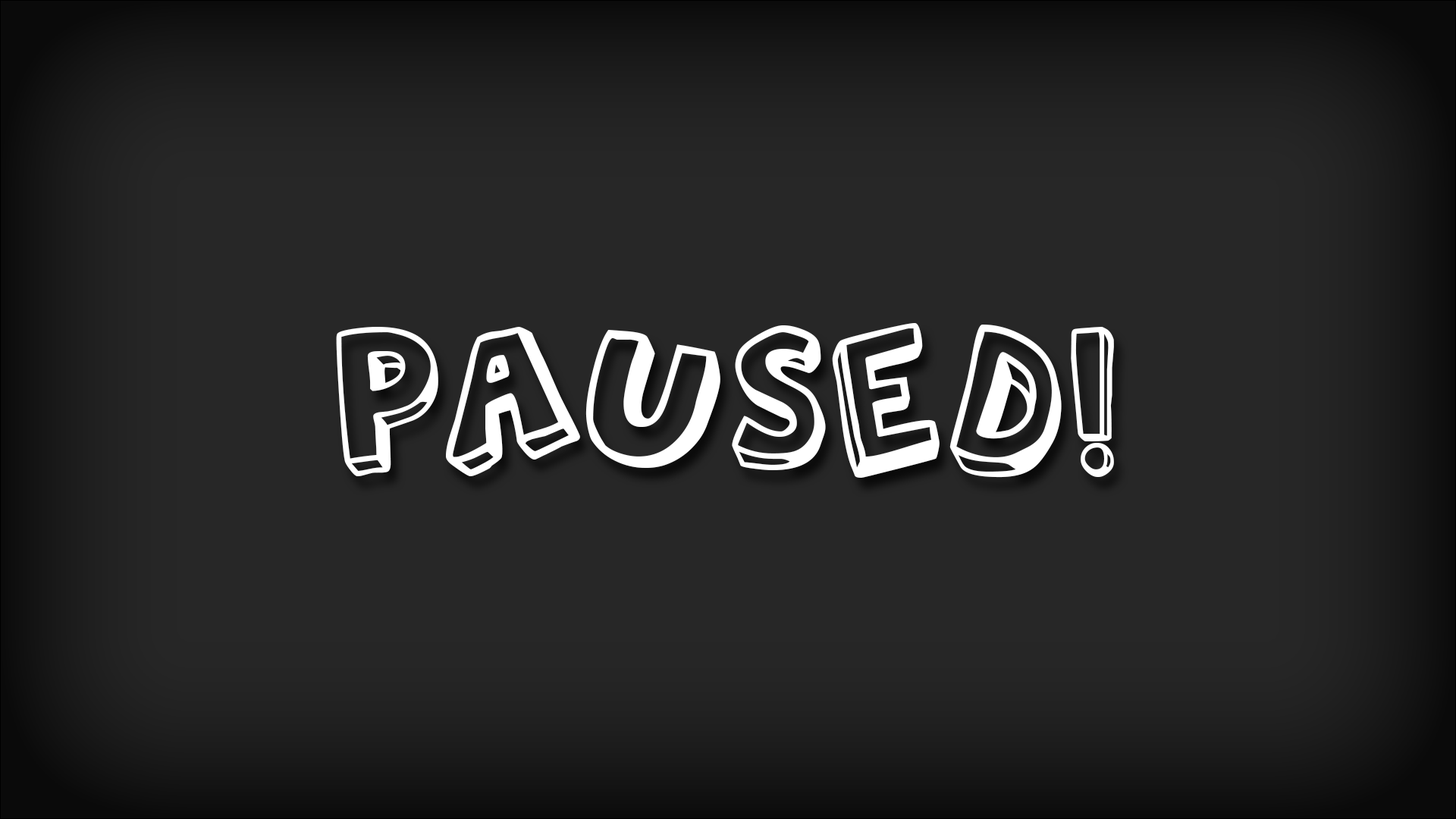
<style>
.page{position:relative;width:1456px;height:819px;background:#272727}
.page>*{position:absolute;margin:0}
.t1{font:197.2px "ActionJackson";color:#ffffff}
</style>
<div class="page">
<p class="t1" style="left:336px;top:323px;width:778px;height:155px">Paused!</p>
</div>
